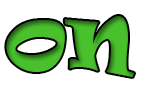
<style>
.page{position:relative;width:144px;height:86px;background:#ffffff}
.page>*{position:absolute;margin:0}
.t1{font:86.8px "Ravie";color:#49c12c}
</style>
<div class="page">
<p class="t1" style="left:6px;top:16px;width:128px;height:61px">on</p>
</div>
